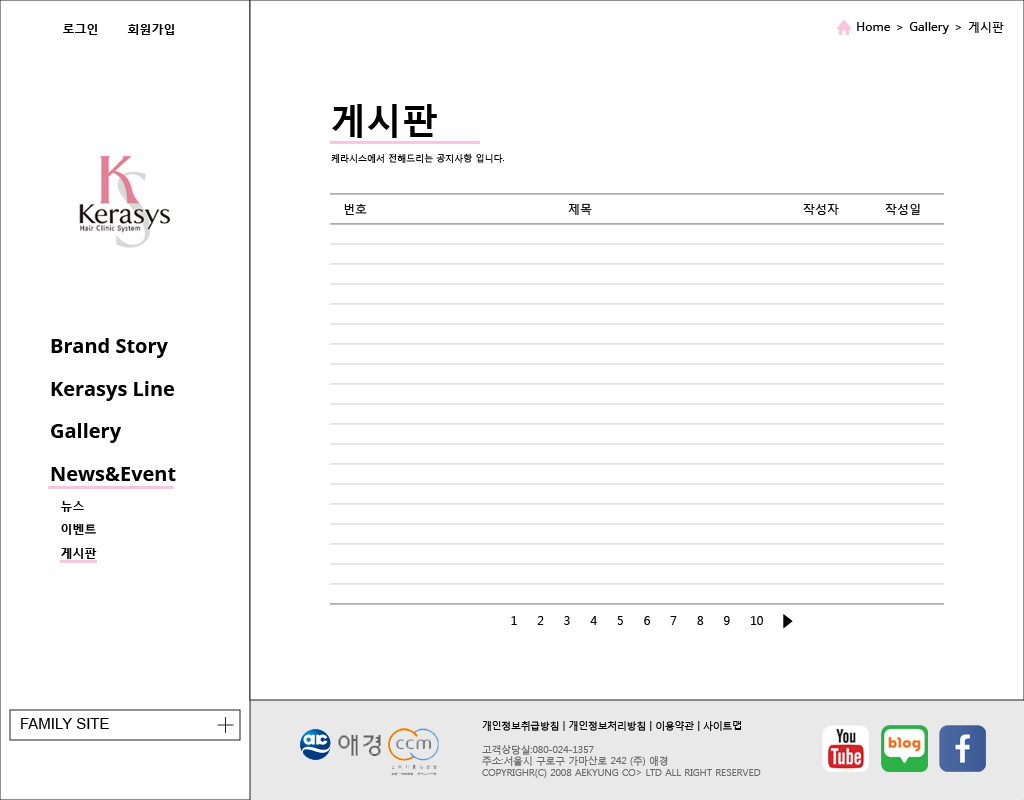
<style>
.page{position:relative;width:1024px;height:800px;background:#ffffff}
.page>*{position:absolute;margin:0}
.t1{font:12px "MalgunGothicBold";color:#000000}
.t2{font:12px "NotoSans";color:#000000}
.t3{font:12px "MalgunGothicRegular";color:#000000}
.t4{font:12px "MalgunGothicRegular"}
.t5{font:36px "MalgunGothicBold";color:#000000}
.t6{font:9px "MalgunGothicRegular";color:#000000}
.t7{font:20px "NotoSans-Bold";color:#000000}
.t8{font:15px "ArialMT";color:#000000}
.t9{font:9.7px "MalgunGothicRegular";color:#6e6b6b}
.t10{font:9.7px "MalgunGothicRegular";color:#000000}
</style>
<div class="page">
<p class="t1" style="left:63px;top:24px;width:35px;height:11px">로그인</p>
<p class="t1" style="left:127px;top:24px;width:47px;height:11px">회원가입</p>
<p class="t2" style="left:857px;top:22px;width:33px;height:9px">Home</p>
<p class="t3" style="left:897px;top:25px;width:6px;height:5px">&gt;</p>
<p class="t2" style="left:909px;top:22px;width:40px;height:12px">Gallery</p>
<p class="t4" style="left:955px;top:25px;width:6px;height:5px">&gt;</p>
<p class="t3" style="left:968px;top:22px;width:36px;height:11px">게시판</p>
<p class="t5" style="left:332px;top:104px;width:105px;height:34px">게시판</p>
<p class="t6" style="left:331px;top:153px;width:173px;height:10px">케라시스에서 전해드리는 공지사항 입니다.</p>
<p class="t3" style="left:344px;top:203px;width:23px;height:12px">번호</p>
<p class="t3" style="left:568px;top:203px;width:24px;height:13px">제목</p>
<p class="t3" style="left:803px;top:204px;width:36px;height:11px">작성자</p>
<p class="t3" style="left:885px;top:203px;width:35px;height:12px">작성일</p>
<p class="t7" style="left:51px;top:338px;width:117px;height:20px">Brand Story</p>
<p class="t7" style="left:51px;top:381px;width:123px;height:20px">Kerasys Line</p>
<p class="t7" style="left:51px;top:423px;width:70px;height:20px">Gallery</p>
<p class="t7" style="left:51px;top:467px;width:125px;height:14px">News&amp;Event</p>
<p class="t1" style="left:61px;top:501px;width:23px;height:11px">뉴스</p>
<p class="t1" style="left:61px;top:524px;width:35px;height:11px">이벤트</p>
<p class="t1" style="left:61px;top:548px;width:36px;height:11px">게시판</p>
<p class="t3" style="left:511px;top:616px;width:6px;height:9px">1</p>
<p class="t3" style="left:537px;top:616px;width:7px;height:9px">2</p>
<p class="t3" style="left:564px;top:616px;width:6px;height:9px">3</p>
<p class="t3" style="left:590px;top:616px;width:7px;height:9px">4</p>
<p class="t3" style="left:617px;top:616px;width:6px;height:9px">5</p>
<p class="t3" style="left:644px;top:616px;width:6px;height:9px">6</p>
<p class="t3" style="left:670px;top:616px;width:7px;height:9px">7</p>
<p class="t3" style="left:697px;top:616px;width:7px;height:9px">8</p>
<p class="t3" style="left:724px;top:616px;width:6px;height:9px">9</p>
<p class="t3" style="left:751px;top:616px;width:12px;height:9px">10</p>
<p class="t8" style="left:21px;top:718px;width:88px;height:11px">FAMILY SITE</p>
<p class="t9" style="left:482px;top:721px;width:279px;height:57px;text-align:justify"><span class="t10">개인정보취급방침 | 개인정보처리방침 | 이용약관 | 사이트맵<br><br></span>고객상당실:080-024-1357<br>주소:서울시 구로구 가마산로 242 (주) 애경<br>COPYRIGHR(C) 2008 AEKYUNG CO&gt; LTD ALL RIGHT RESERVED</p>
</div>
